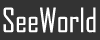
<style>
.page{position:relative;width:100px;height:40px;background:#333333}
.page>*{position:absolute;margin:0}
.t1{font:32px "AgencyFB-Reg";color:#ffffff}
</style>
<div class="page">
<p class="t1" style="left:3px;top:7px;width:93px;height:26px">SeeWorld</p>
</div>
